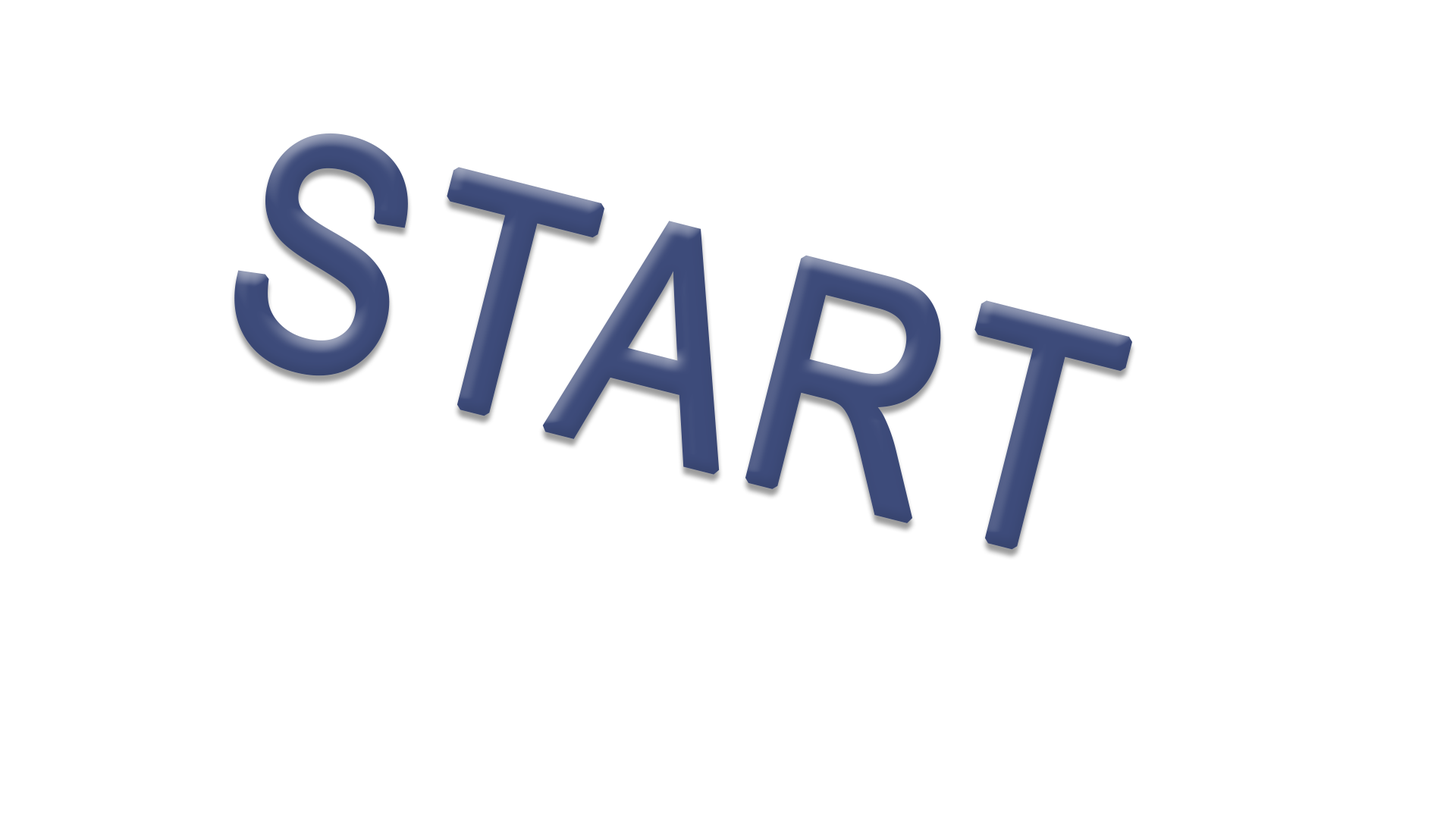
<style>
.page{position:relative;width:1456px;height:819px;background:#ffffff}
.page>*{position:absolute;margin:0}
.t1{font:316px "ArialNarrow";letter-spacing:0.025em;color:#3d4b7a;font-weight:bold}
</style>
<div class="page">
<p class="t1" style="left:234px;top:133px;width:898px;height:417px;rotate:14deg">START</p>
</div>
